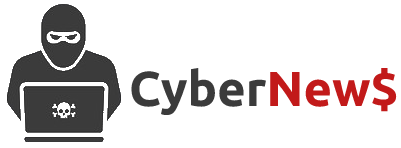
<style>
.page{position:relative;width:401px;height:148px;background:#ffffff}
.page>*{position:absolute;margin:0}
.t1{font:49px "Ubuntu-Bold";color:#3b3b3b}
.t2{font:49px "Ubuntu-Bold";color:#c21a1a}
</style>
<div class="page">
<p class="t1" style="left:131px;top:67px;width:266px;height:49px">Cyber<span class="t2">New$</span></p>
</div>
